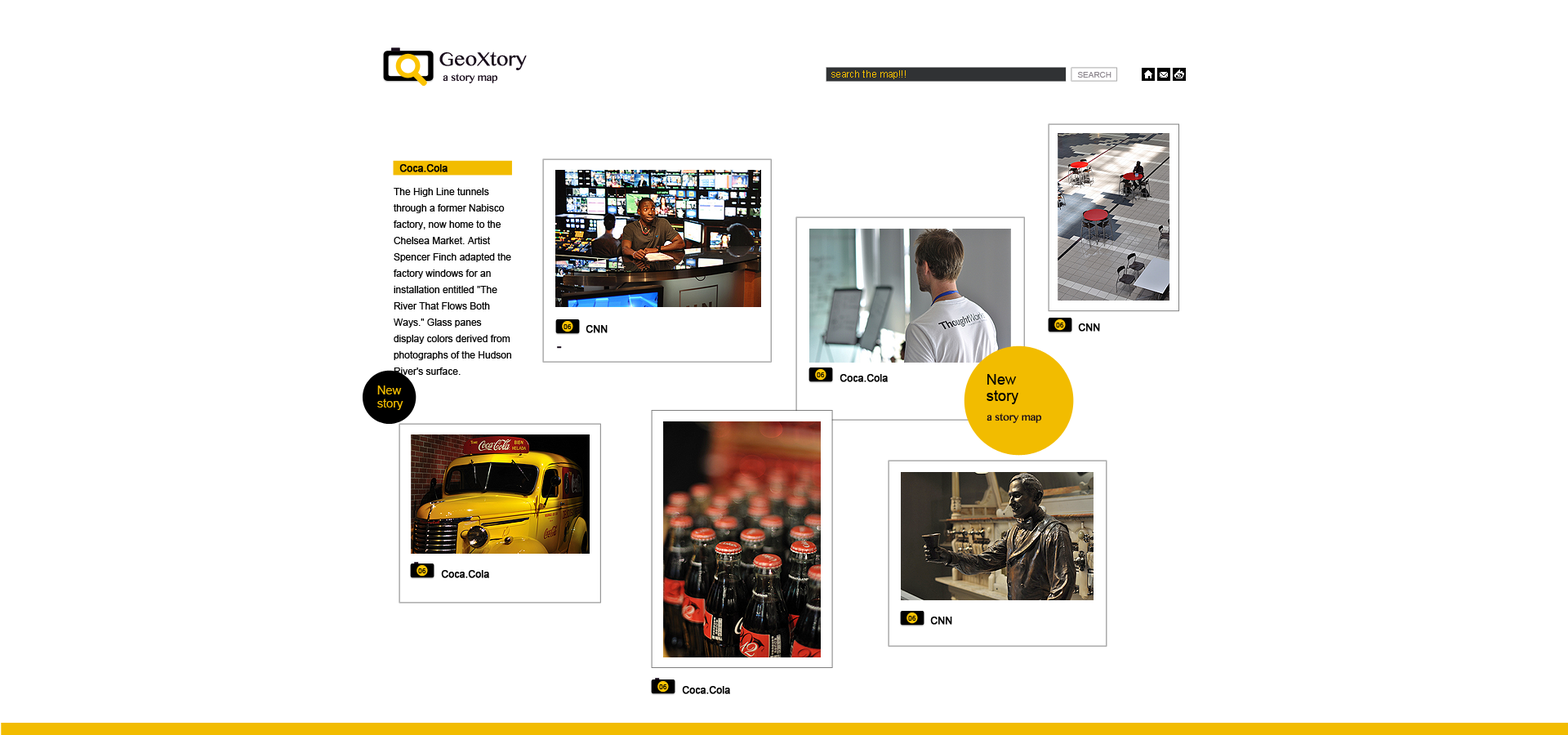
<style>
.page{position:relative;width:1568px;height:735px;background:#ffffff}
.page>*{position:absolute;margin:0}
.t1{font:27px "SinhalaMN";color:#190d1c}
.t2{font:14.1px "SinhalaMN";color:#190d1c}
.t3{font:9.8px "ArialMT";color:#f2bc00}
.t4{font:8.1px "ArialMT";color:#8c868d;text-transform:uppercase}
.t5{font:9.8px "ArialMT";color:#000000;font-weight:bold}
.t6{font:9.8px/16.3px "ArialMT";color:#000000}
.t7{font:6.8px "ArialMT";color:#000000}
.t8{font:14.9px/16.6px "ArialMT";color:#000000}
.t9{font:11.9px/13.2px "ArialMT";color:#f2bc00}
</style>
<div class="page">
<p class="t1" style="left:439px;top:51px;width:88px;height:19px">GeoXtory</p>
<p class="t2" style="left:443px;top:74px;width:54px;height:9px">a story map</p>
<p class="t3" style="left:831px;top:70px;width:75px;height:9px">search the map!!!</p>
<p class="t4" style="left:1077px;top:72px;width:34px;height:6px">Search</p>
<p class="t5" style="left:399px;top:164px;width:49px;height:8px">Coca.Cola</p>
<p class="t6" style="left:394px;top:188px;width:117px;height:187px">The High Line tunnels through a former Nabisco factory, now home to the Chelsea Market. Artist Spencer Finch adapted the factory windows for an installation entitled "The River That Flows Both Ways." Glass panes display colors derived from photographs of the Hudson River's surface.</p>
<p class="t7" style="left:564px;top:324px;width:8px;height:5px">06</p>
<p class="t5" style="left:586px;top:325px;width:22px;height:8px">CNN</p>
<p class="t7" style="left:1056px;top:323px;width:8px;height:4px">06</p>
<p class="t5" style="left:1078px;top:323px;width:22px;height:9px">CNN</p>
<p class="t7" style="left:817px;top:372px;width:8px;height:5px">06</p>
<p class="t5" style="left:840px;top:374px;width:48px;height:8px">Coca.Cola</p>
<p class="t8" style="left:987px;top:374px;width:31px;height:30px">New <br>story</p>
<p class="t9" style="left:377px;top:385px;width:26px;height:25px">New <br>story</p>
<p class="t2" style="left:987px;top:413px;width:54px;height:10px">a story map</p>
<p class="t7" style="left:418px;top:568px;width:8px;height:5px">06</p>
<p class="t5" style="left:441px;top:570px;width:48px;height:8px">Coca.Cola</p>
<p class="t7" style="left:908px;top:616px;width:8px;height:5px">06</p>
<p class="t5" style="left:930px;top:617px;width:22px;height:8px">CNN</p>
<p class="t7" style="left:659px;top:684px;width:8px;height:5px">06</p>
<p class="t5" style="left:682px;top:686px;width:48px;height:8px">Coca.Cola</p>
</div>
